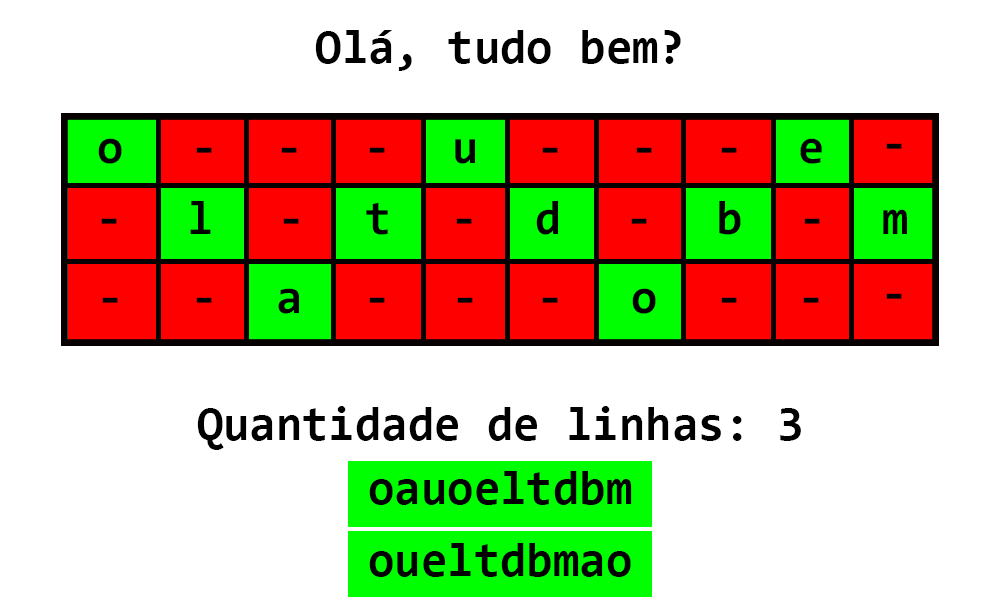
<style>
.page{position:relative;width:1000px;height:600px;background:#ffffff}
.page>*{position:absolute;margin:0}
.t1{font:48px "Consolas-Bold";color:#000000}
.t2{font:48.1px "Consolas-Bold";color:#000000}
</style>
<div class="page">
<p class="t1" style="left:315px;top:30px;width:366px;height:41px">Olá, tudo bem?</p>
<p class="t2" style="left:98px;top:138px;width:24px;height:26px">o</p>
<p class="t2" style="left:196px;top:147px;width:16px;height:6px">-</p>
<p class="t2" style="left:281px;top:147px;width:16px;height:6px">-</p>
<p class="t2" style="left:369px;top:147px;width:16px;height:6px">-</p>
<p class="t2" style="left:455px;top:139px;width:20px;height:25px">u</p>
<p class="t2" style="left:542px;top:147px;width:16px;height:6px">-</p>
<p class="t2" style="left:636px;top:147px;width:16px;height:6px">-</p>
<p class="t2" style="left:721px;top:147px;width:16px;height:6px">-</p>
<p class="t2" style="left:800px;top:138px;width:22px;height:26px">e</p>
<p class="t2" style="left:886px;top:143px;width:16px;height:6px">-</p>
<p class="t2" style="left:190px;top:201px;width:21px;height:33px">l</p>
<p class="t2" style="left:366px;top:202px;width:22px;height:33px">t</p>
<p class="t2" style="left:536px;top:201px;width:22px;height:34px">d</p>
<p class="t2" style="left:719px;top:201px;width:22px;height:34px">b</p>
<p class="t2" style="left:883px;top:209px;width:24px;height:25px">m</p>
<p class="t2" style="left:101px;top:218px;width:16px;height:6px">-</p>
<p class="t2" style="left:283px;top:218px;width:16px;height:6px">-</p>
<p class="t2" style="left:456px;top:218px;width:16px;height:6px">-</p>
<p class="t2" style="left:631px;top:218px;width:16px;height:6px">-</p>
<p class="t2" style="left:804px;top:218px;width:16px;height:6px">-</p>
<p class="t2" style="left:278px;top:288px;width:21px;height:26px">a</p>
<p class="t2" style="left:632px;top:288px;width:24px;height:26px">o</p>
<p class="t2" style="left:886px;top:293px;width:16px;height:6px">-</p>
<p class="t2" style="left:102px;top:297px;width:16px;height:6px">-</p>
<p class="t2" style="left:196px;top:297px;width:16px;height:6px">-</p>
<p class="t2" style="left:369px;top:297px;width:16px;height:6px">-</p>
<p class="t2" style="left:457px;top:297px;width:16px;height:6px">-</p>
<p class="t2" style="left:542px;top:297px;width:16px;height:6px">-</p>
<p class="t2" style="left:721px;top:297px;width:16px;height:6px">-</p>
<p class="t2" style="left:803px;top:297px;width:16px;height:6px">-</p>
<p class="t1" style="left:197px;top:406px;width:604px;height:44px">Quantidade de linhas: 3</p>
<p class="t1" style="left:369px;top:471px;width:263px;height:34px">oauoeltdbm</p>
<p class="t1" style="left:369px;top:543px;width:262px;height:34px">oueltdbmao</p>
</div>
